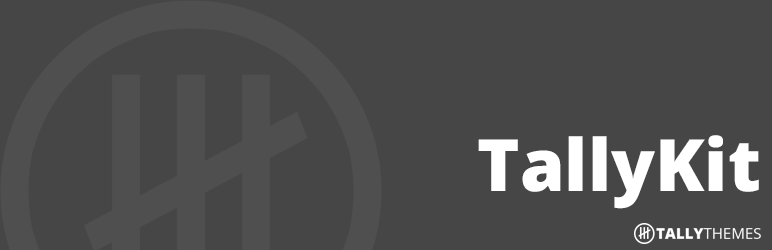
<style>
.page{position:relative;width:772px;height:250px;background:#464646}
.page>*{position:absolute;margin:0}
.t1{font:72px "OpenSans-Extrabold";color:#ffffff}
</style>
<div class="page">
<p class="t1" style="left:478px;top:135px;width:281px;height:74px">TallyKit</p>
</div>
